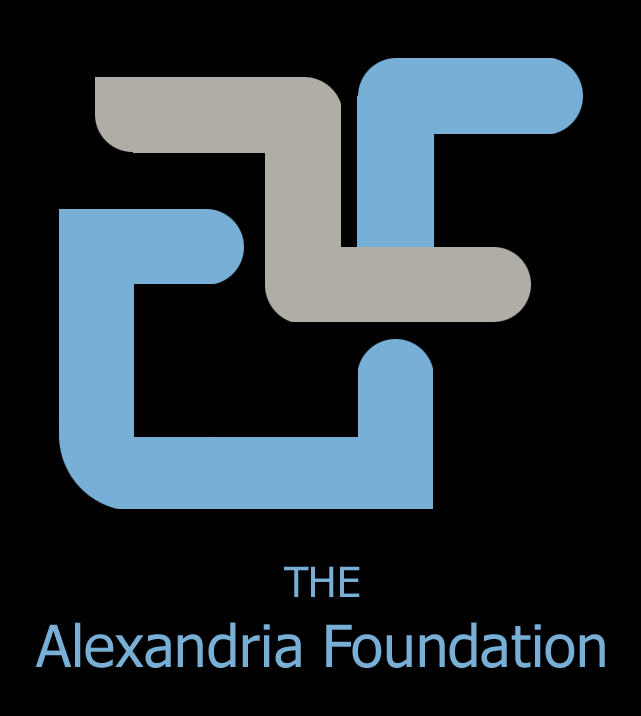
<style>
.page{position:relative;width:641px;height:716px;background:#000000}
.page>*{position:absolute;margin:0}
.t1{font:58.3px "Tahoma";color:#78afd7}
.t2{font:41.7px "Tahoma";color:#78afd7}
</style>
<div class="page">
<p class="t1" style="left:35px;top:566px;width:570px;height:102px;text-align:center"><span class="t2">THE <br></span>Alexandria Foundation</p>
</div>
